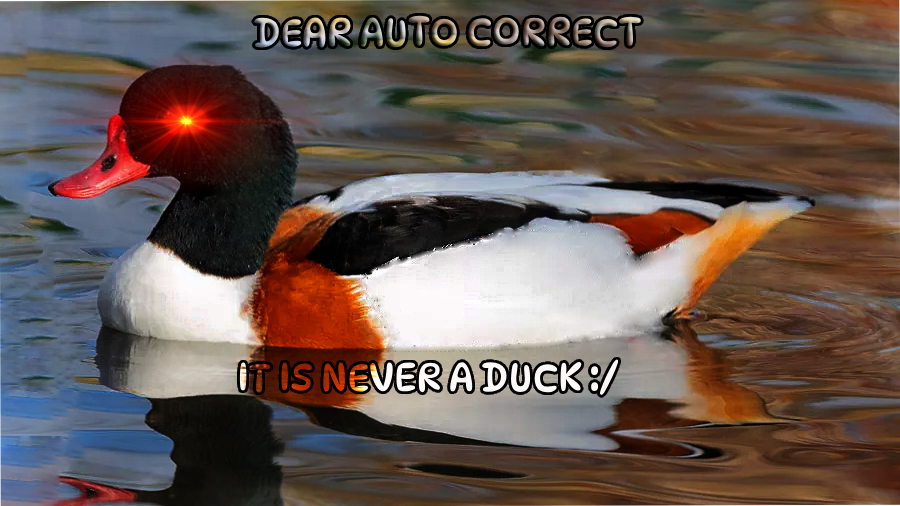
<style>
.page{position:relative;width:900px;height:506px}
.page>*{position:absolute;margin:0}
.t1{font:39px "DynaPuff-Regular"}
.t2{font:39px "DynaPuff-Regular";color:#fcf7f7}
</style>
<div class="page">
<p class="t1" style="left:254px;top:15px;width:387px;height:33px">DEAR AUTO CORRECT</p>
<p class="t2" style="left:239px;top:359px;width:380px;height:36px">IT IS NEVER A DUCK :/</p>
</div>
